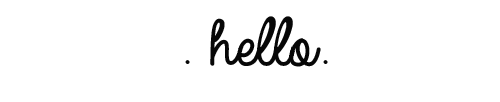
<style>
.page{position:relative;width:500px;height:102px;background:#ffffff}
.page>*{position:absolute;margin:0}
.t1{font:72px "AlwaysInMyHeart";color:#070707}
</style>
<div class="page">
<p class="t1" style="left:185px;top:16px;width:143px;height:51px">. hello.</p>
</div>
